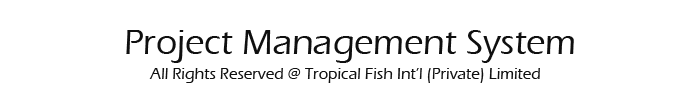
<style>
.page{position:relative;width:700px;height:108px;background:#ffffff}
.page>*{position:absolute;margin:0}
.t1{font:36px "ErasITC-Medium";color:#0f0f0f}
.t2{font:16px "ErasITC-Medium";color:#0f0f0f}
</style>
<div class="page">
<p class="t1" style="left:126px;top:30px;width:448px;height:33px">Project Management System</p>
<p class="t2" style="left:149px;top:68px;width:391px;height:15px">All Rights Reserved @ Tropical Fish Int’l (Private) Limited</p>
</div>
